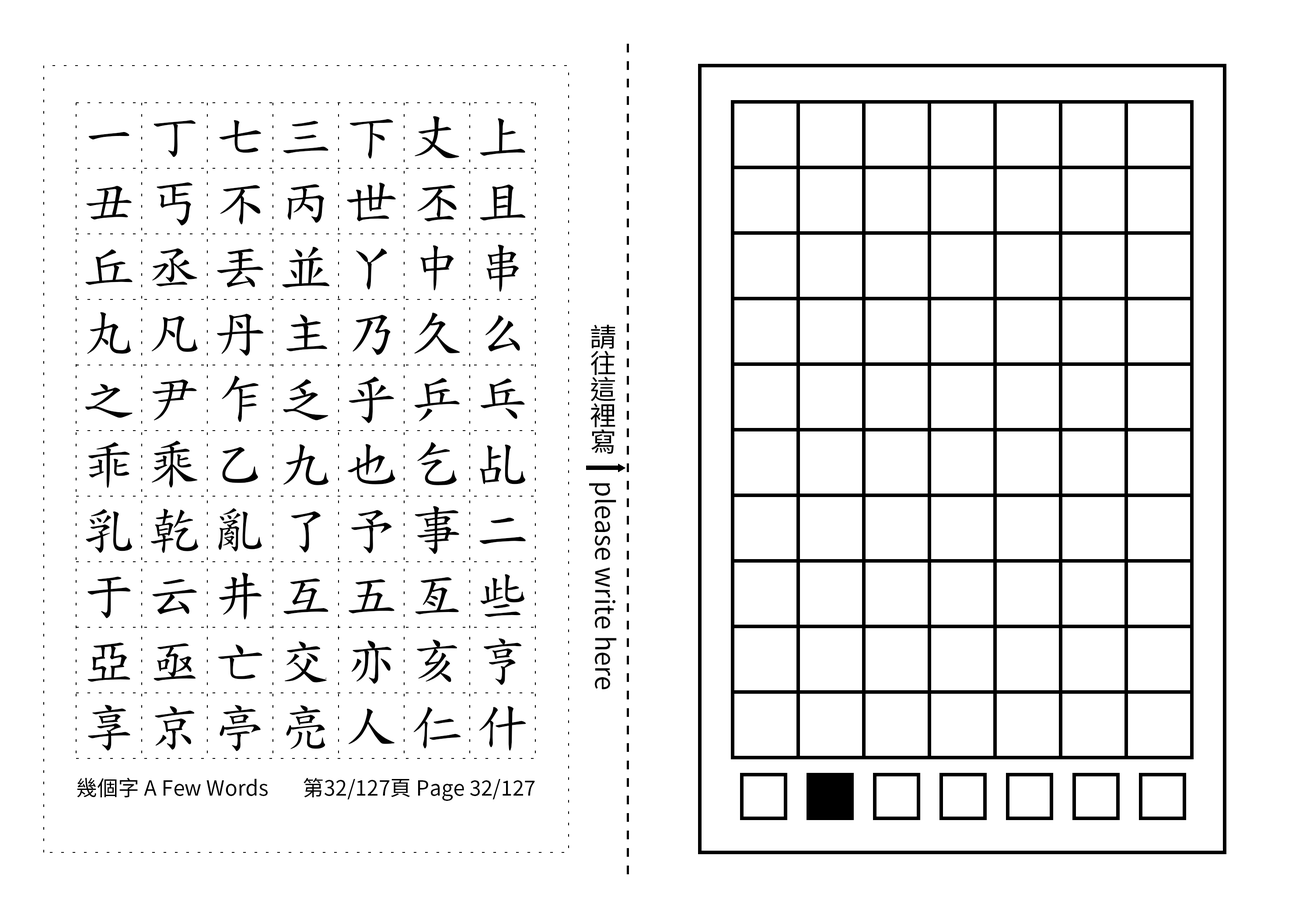
<style>
.page{position:relative;width:1299px;height:918px;background:#ffffff}
.page>*{position:absolute;margin:0}
.t1{font:52.5px/65.6px "TW-Kai-98_1";letter-spacing:0.25em;color:#000000}
.t2{font:26.2px "SourceHanSansTC-Regular";color:#000000}
.t3{font:21px "SourceHanSansTC-Regular";color:#000000}
</style>
<div class="page">
<p class="t1" style="left:85px;top:116px;width:441px;height:636px;text-align:center">一丁七三下丈上丑丐不丙世丕且丘丞丟並丫中串丸凡丹主乃久么之尹乍乏乎乒乓乖乘乙九也乞乩乳乾亂了予事二于云井互五亙些亞亟亡交亦亥亨享京亭亮人仁什</p>
<p class="t2" style="left:589px;top:324px;width:28px;height:366px;text-align:center">請往這裡寫　please write here</p>
<p class="t3" style="left:77px;top:778px;width:191px;height:20px">幾個字 A Few Words</p>
<p class="t3" style="left:303px;top:778px;width:232px;height:23px">第32/127頁 Page 32/127</p>
</div>
